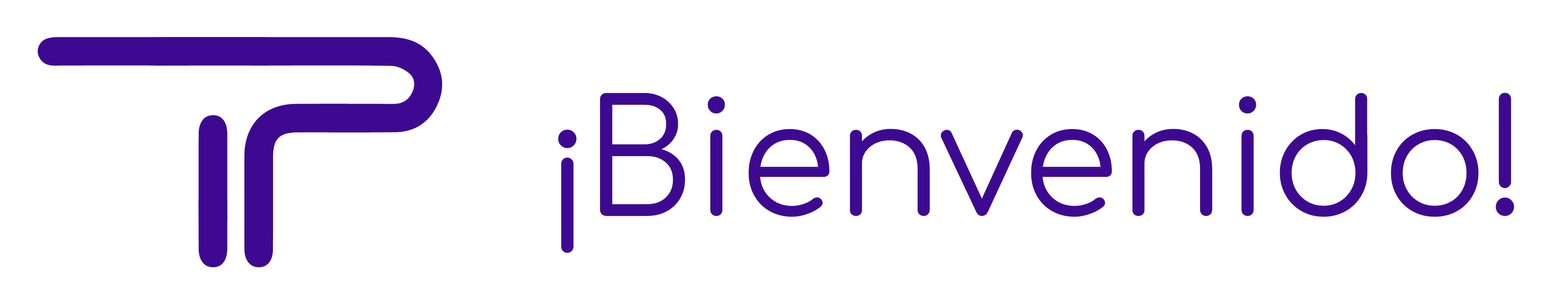
<style>
.page{position:relative;width:1568px;height:301px;background:#ffffff}
.page>*{position:absolute;margin:0}
.t1{font:157.4px "Comfortaa-Regular";color:#3e0991}
</style>
<div class="page">
<p class="t1" style="left:558px;top:93px;width:956px;height:160px">¡Bienvenido!</p>
</div>
